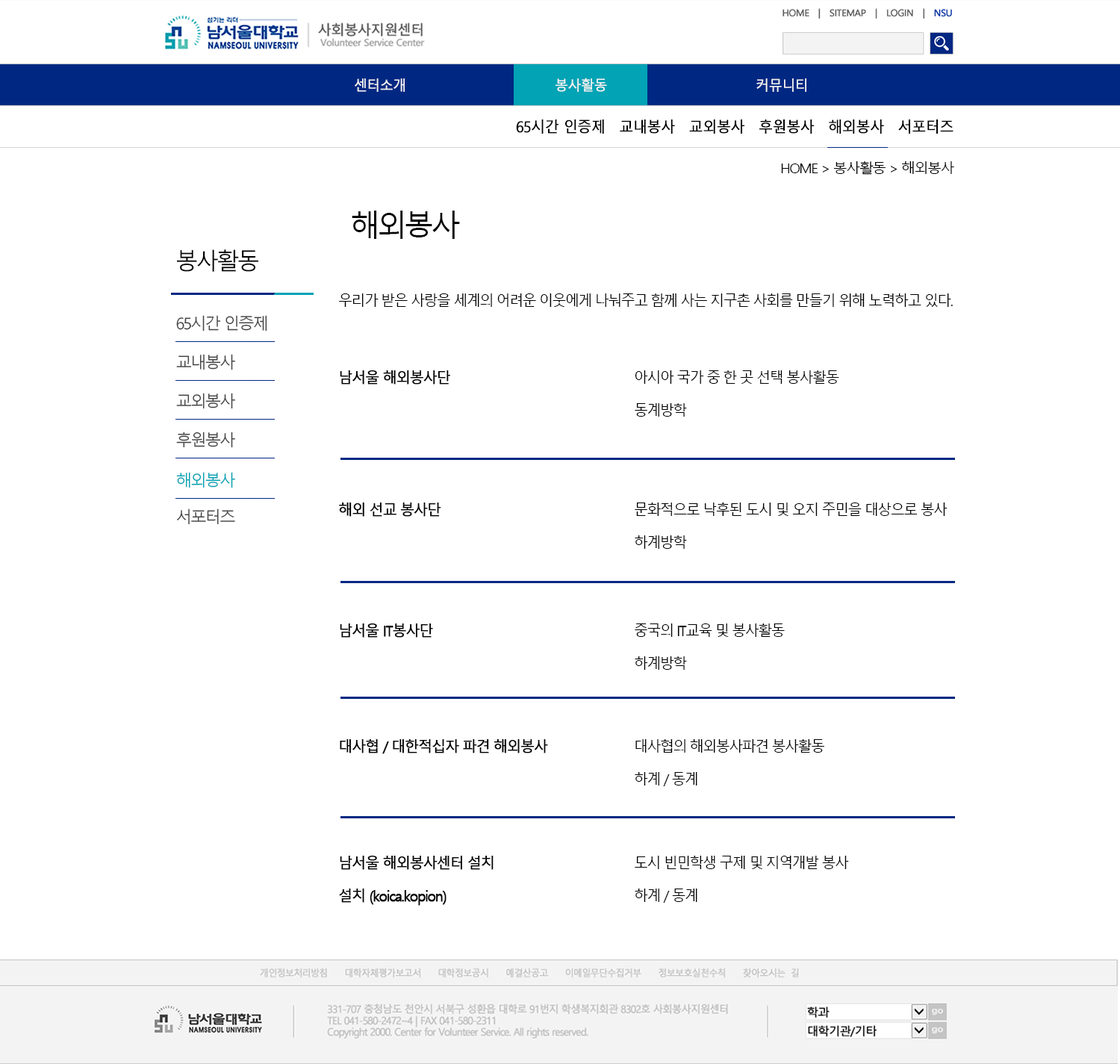
<style>
.page{position:relative;width:1120px;height:1064px;background:#ffffff}
.page>*{position:absolute;margin:0}
.t1{font:14px "MalgunGothicRegular";letter-spacing:-0.05em;color:#f3f3f3;font-weight:bold;scale:0.95 1}
.t2{font:14.9px "MalgunGothicRegular";letter-spacing:-0.05em;color:#000000;font-weight:bold;scale:0.95 1}
.t3{font:13.8px "MalgunGothicRegular";letter-spacing:-0.1em;color:#000000;scale:1.05 1}
.t4{font:29.9px "MalgunGothicRegular";letter-spacing:-0.1em;color:#000000}
.t5{font:23.2px "MalgunGothicRegular";letter-spacing:-0.1em;color:#000000}
.t6{font:15.3px "MalgunGothicRegular";letter-spacing:-0.1em;color:#000000;scale:0.95 1}
.t7{font:16.1px "MalgunGothicRegular";letter-spacing:-0.1em;color:#454444}
.t8{font:15.3px/32.9px "MalgunGothicRegular";letter-spacing:-0.1em;color:#000000;scale:0.95 1}
.t9{font:15.3px/32.9px "MalgunGothicRegular";letter-spacing:-0.1em;color:#000000;font-weight:bold;scale:0.95 1}
.t10{font:16.1px "MalgunGothicRegular";letter-spacing:-0.1em;color:#01a3b5}
</style>
<div class="page">
<p class="t1" style="left:355px;top:78px;width:452px;height:14px">센터소개        봉사활동       커뮤니티</p>
<p class="t2" style="left:516px;top:120px;width:438px;height:14px">65시간 인증제　교내봉사　교외봉사　후원봉사　해외봉사　서포터즈</p>
<p class="t3" style="left:781px;top:161px;width:174px;height:14px">HOME &gt; 봉사활동 &gt; 해외봉사</p>
<p class="t4" style="left:352px;top:211px;width:108px;height:28px">해외봉사</p>
<p class="t5" style="left:177px;top:249px;width:81px;height:23px">봉사활동</p>
<p class="t6" style="left:339px;top:294px;width:614px;height:13px">우리가 받은 사랑을 세계의 어려운 이웃에게 나눠주고 함께 사는 지구촌 사회를 만들기 위해 노력하고 있다.</p>
<p class="t7" style="left:176px;top:315px;width:91px;height:17px">65시간 인증제</p>
<p class="t7" style="left:176px;top:354px;width:59px;height:16px">교내봉사</p>
<p class="t8" style="left:340px;top:370px;width:500px;height:47px"><span class="t9">남서울 해외봉사단</span>        아시아 국가 중 한 곳 선택 봉사활동 <br>      　     동계방학</p>
<p class="t7" style="left:176px;top:393px;width:59px;height:16px">교외봉사</p>
<p class="t7" style="left:176px;top:432px;width:59px;height:16px">후원봉사</p>
<p class="t10" style="left:176px;top:472px;width:59px;height:16px">해외봉사</p>
<p class="t7" style="left:176px;top:509px;width:59px;height:16px">서포터즈</p>
<p class="t8" style="left:339px;top:503px;width:609px;height:46px"><span class="t9">해외 선교 봉사단       　  </span>문화적으로 낙후된 도시 및 오지 주민을 대상으로 봉사<br>      　     하계방학</p>
<p class="t8" style="left:340px;top:624px;width:445px;height:46px"><span class="t9">남서울 IT봉사단         </span>중국의 IT교육 및 봉사활동<br>           하계방학</p>
<p class="t8" style="left:340px;top:739px;width:485px;height:47px"><span class="t9">대사협 / 대한적십자 파견 해외봉사     </span>대사협의 해외봉사파견 봉사활동<br>           하계 / 동계</p>
<p class="t8" style="left:339px;top:856px;width:510px;height:50px"><span class="t9">남서울 해외봉사센터 설치       </span>도시 빈민학생 구제 및 지역개발 봉사<br><span class="t9">설치 (koica.kopion) </span>       하계 / 동계</p>
</div>
